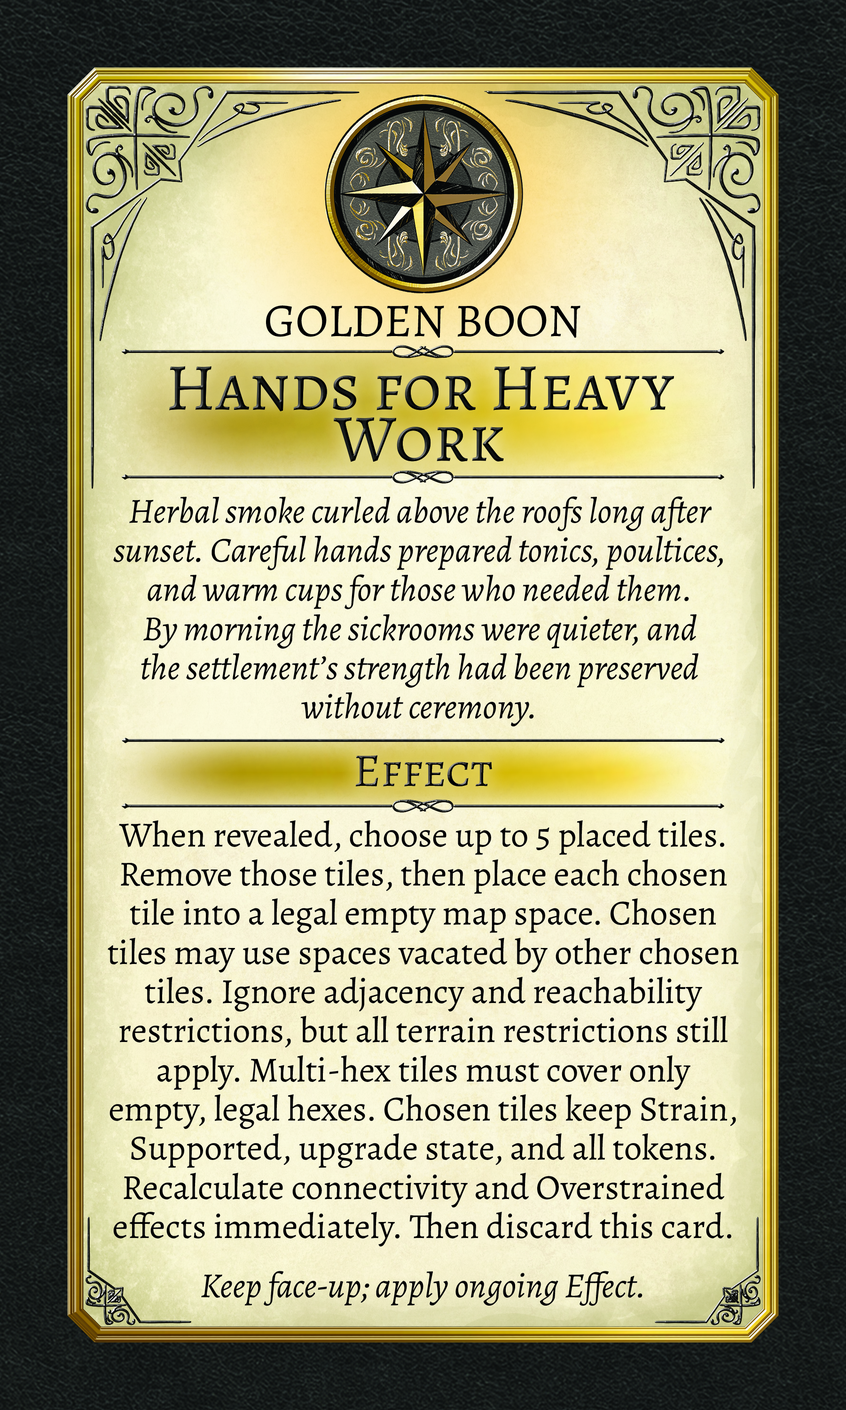
<style>
.page{position:relative;width:846px;height:1410px}
.page>*{position:absolute;margin:0}
.t1{font:47px "Alegreya-Regular";color:#000000;text-transform:uppercase}
.t2{font:66.6px "Alegreya-Regular";color:#000000;font-variant:small-caps}
.t3{font:35.2px/39.2px "Alegreya-Italic";color:#000000}
.t4{font:47px "Alegreya-Regular";font-variant:small-caps}
.t5{font:35.2px/39.2px "Alegreya-Regular";color:#000000}
.t6{font:35.2px "Alegreya-Italic";color:#000000}
</style>
<div class="page">
<p class="t1" style="left:266px;top:305px;width:314px;height:33px">Golden Boon</p>
<p class="t2" style="left:169px;top:366px;width:505px;height:96px">Hands for Heavy Work</p>
<p class="t3" style="left:113px;top:496px;width:610px;height:230px;text-align:center">Herbal smoke curled above the roofs long after sunset. Careful hands prepared tonics, poultices, and warm cups for those who needed them.<br>By morning the sickrooms were quieter, and<br>the settlement’s strength had been preserved without ceremony.</p>
<p class="t4" style="left:355px;top:755px;width:137px;height:31px">Effect</p>
<p class="t5" style="left:108px;top:820px;width:631px;height:426px;text-align:center">When revealed, choose up to 5 placed tiles. Remove those tiles, then place each chosen tile into a legal empty map space. Chosen tiles may use spaces vacated by other chosen tiles. Ignore adjacency and reachability restrictions, but all terrain restrictions still apply. Multi-hex tiles must cover only empty, legal hexes. Chosen tiles keep Strain, Supported, upgrade state, and all tokens. Recalculate connectivity and Overstrained effects immediately. Then discard this card.</p>
<p class="t6" style="left:201px;top:1271px;width:441px;height:35px">Keep face-up; apply ongoing Effect.</p>
</div>
